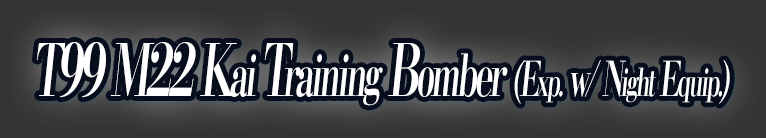
<style>
.page{position:relative;width:766px;height:138px}
.page>*{position:absolute;margin:0}
.t1{font:72px "KochoStd-Heavy";letter-spacing:-0.1em;color:#ffffff;font-style:italic;scale:0.58 1}
.t2{font:57.6px "KochoStd-Heavy";letter-spacing:-0.1em;color:#ffffff;font-style:italic;scale:0.58 1}
.t3{font:48px "KochoStd-Heavy";letter-spacing:-0.1em;color:#ffffff;font-style:italic;scale:0.58 1}
.t4{font:38.4px "KochoStd-Heavy";letter-spacing:-0.1em;color:#ffffff;font-style:italic;scale:0.58 1}
</style>
<div class="page">
<p class="t1" style="left:36px;top:42px;width:694px;height:64px">T99 M22 K<span class="t2">ai </span>T<span class="t2">raining</span> B<span class="t2">omber </span><span class="t3">(E</span><span class="t4">xp.</span><span class="t3"> w/ N</span><span class="t4">ight</span><span class="t3"> E</span><span class="t4">quip.</span><span class="t3">)</span></p>
</div>
